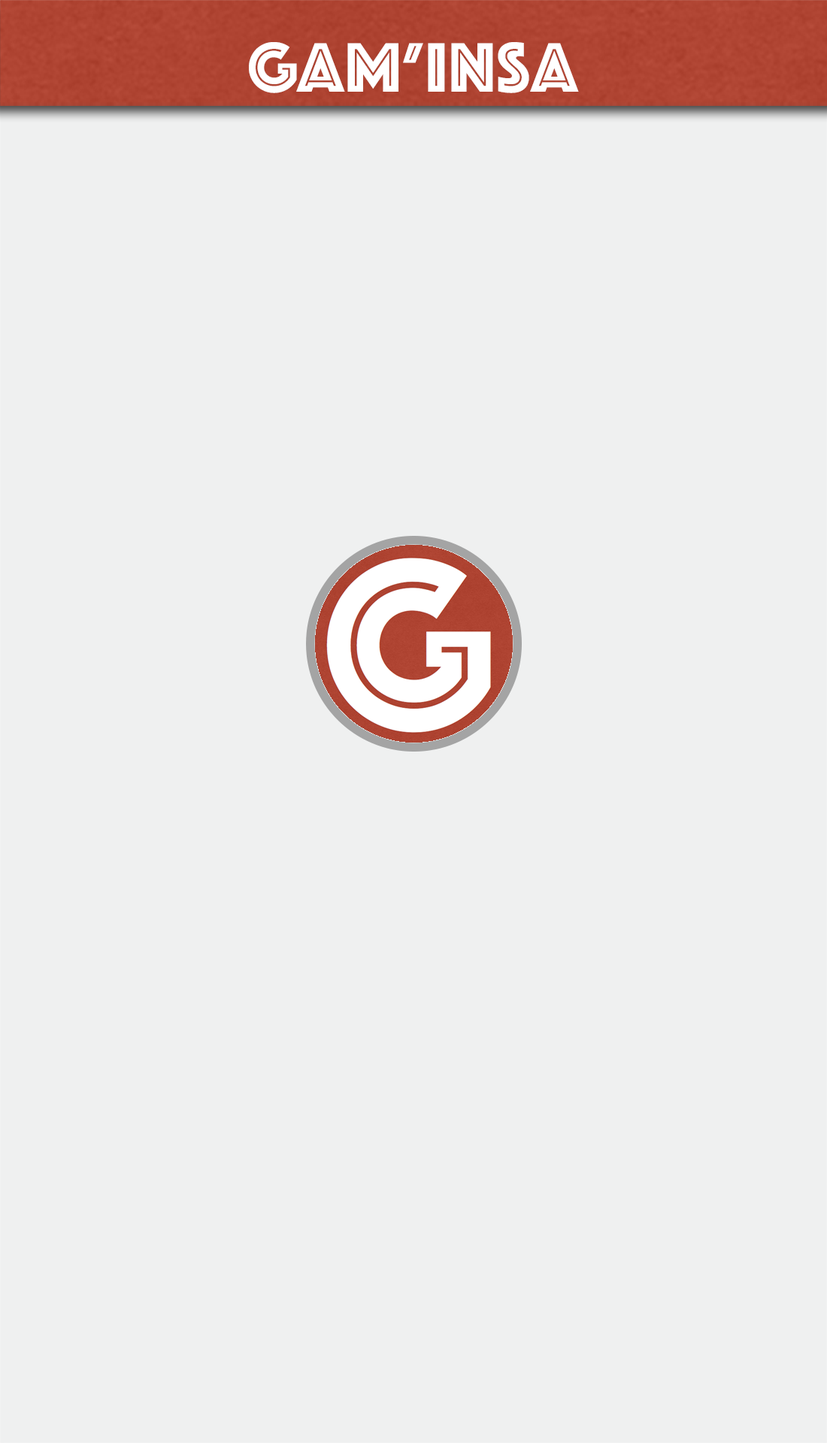
<style>
.page{position:relative;width:827px;height:1443px;background:#eff0f0}
.page>*{position:absolute;margin:0}
.t1{font:72.7px "Phosphate-Inline";letter-spacing:0.025em;color:#ffffff}
</style>
<div class="page">
<p class="t1" style="left:249px;top:42px;width:330px;height:51px">GAM’INSA</p>
</div>
